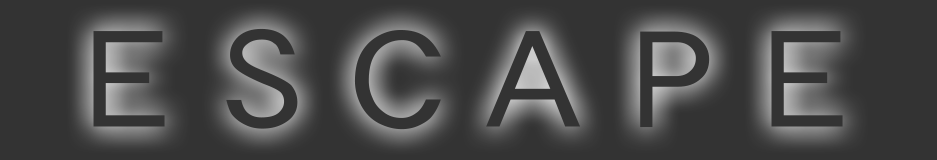
<style>
.page{position:relative;width:937px;height:160px;background:#333333}
.page>*{position:absolute;margin:0}
.t1{font:135.7px "GrisaiaCustom";color:#333333}
</style>
<div class="page">
<p class="t1" style="left:93px;top:28px;width:750px;height:102px">ＥＳＣＡＰＥ</p>
</div>
